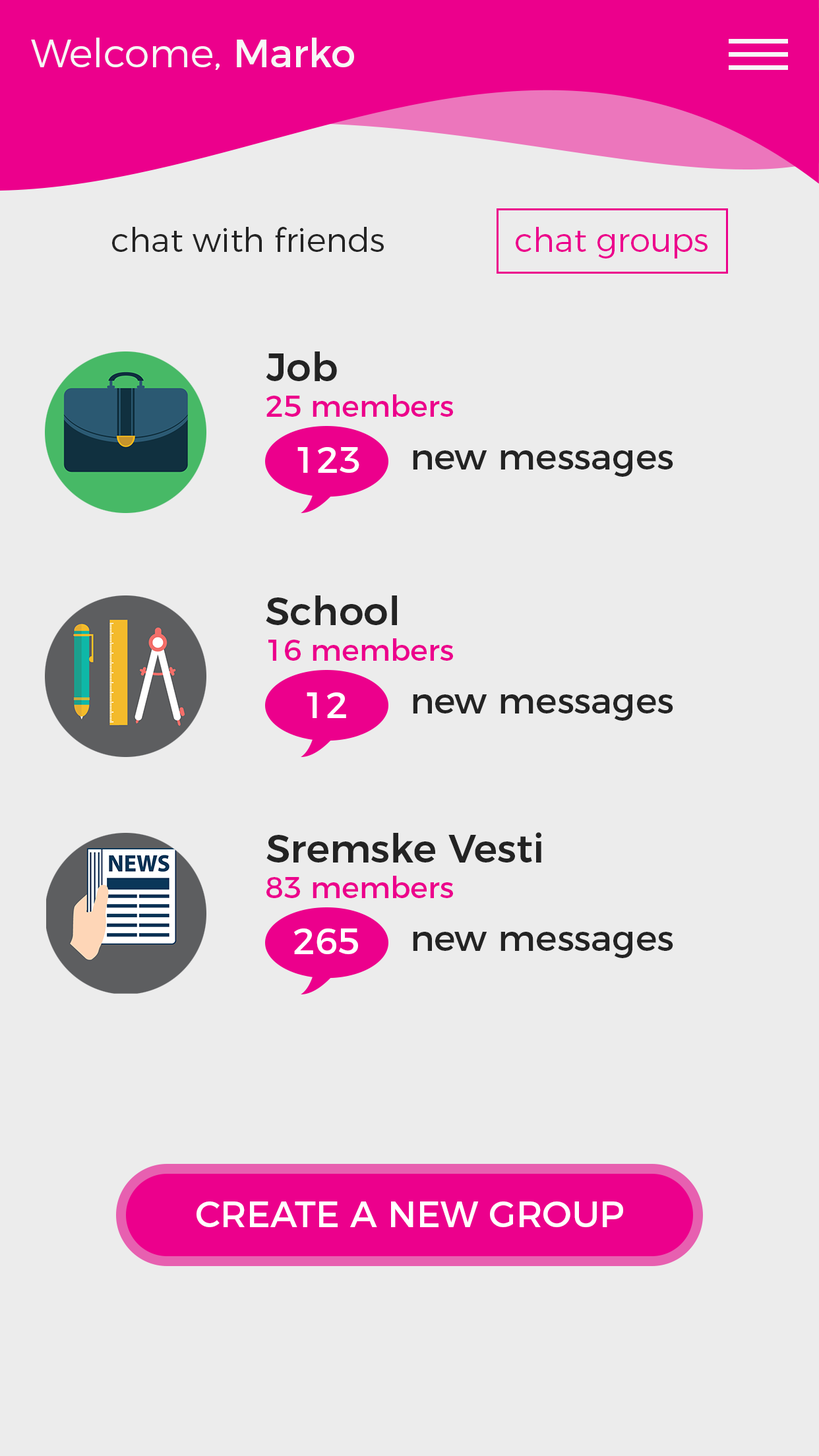
<style>
.page{position:relative;width:819px;height:1456px;background:#ececec}
.page>*{position:absolute;margin:0}
.t1{font:39.6px "Montserrat-Light";color:#f7f7f7}
.t2{font:39.6px "Montserrat-Regular";color:#f7f7f7}
.t3{font:33px "Montserrat-Light";color:#232323}
.t4{font:33px "Montserrat-Light";color:#ec008c}
.t5{font:39.6px "Montserrat-Medium";color:#232323}
.t6{font:29.7px "Montserrat-Regular";color:#ec008c}
.t7{font:36.3px "Montserrat-Regular";color:#ffffff}
.t8{font:36.3px "Montserrat-Regular";color:#232323}
</style>
<div class="page">
<p class="t1" style="left:31px;top:38px;width:323px;height:32px">Welcome, <span class="t2">Marko</span></p>
<p class="t3" style="left:112px;top:227px;width:596px;height:31px">chat with friends      <span class="t4">chat groups</span></p>
<p class="t5" style="left:266px;top:351px;width:71px;height:30px">Job</p>
<p class="t6" style="left:266px;top:394px;width:187px;height:23px">25 members</p>
<p class="t7" style="left:297px;top:447px;width:62px;height:26px">123</p>
<p class="t8" style="left:413px;top:450px;width:260px;height:27px">new messages</p>
<p class="t5" style="left:266px;top:595px;width:131px;height:30px">School</p>
<p class="t6" style="left:268px;top:638px;width:185px;height:23px">16 members</p>
<p class="t7" style="left:307px;top:692px;width:39px;height:26px">12</p>
<p class="t8" style="left:413px;top:694px;width:260px;height:27px">new messages</p>
<p class="t5" style="left:266px;top:832px;width:275px;height:31px">Sremske Vesti</p>
<p class="t6" style="left:266px;top:876px;width:187px;height:22px">83 members</p>
<p class="t7" style="left:294px;top:928px;width:64px;height:26px">265</p>
<p class="t8" style="left:413px;top:932px;width:260px;height:26px">new messages</p>
<p class="t7" style="left:197px;top:1201px;width:426px;height:26px">CREATE A NEW GROUP</p>
</div>
